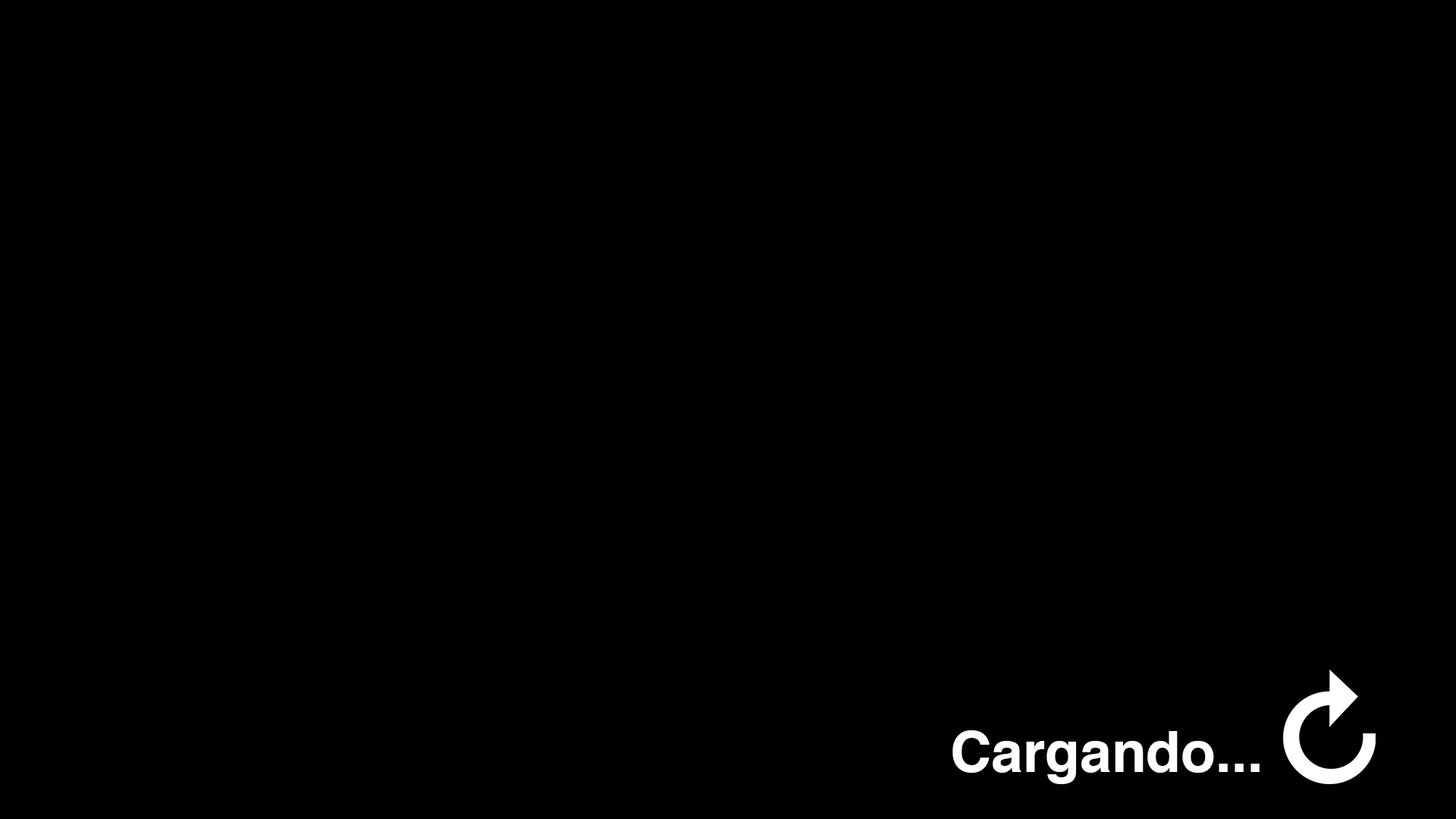
<style>
.page{position:relative;width:1456px;height:819px;background:#000000}
.page>*{position:absolute;margin:0}
.t1{font:56.9px "Helvetica-Bold";color:#ffffff}
</style>
<div class="page">
<p class="t1" style="left:952px;top:730px;width:308px;height:54px">Cargando...</p>
</div>
